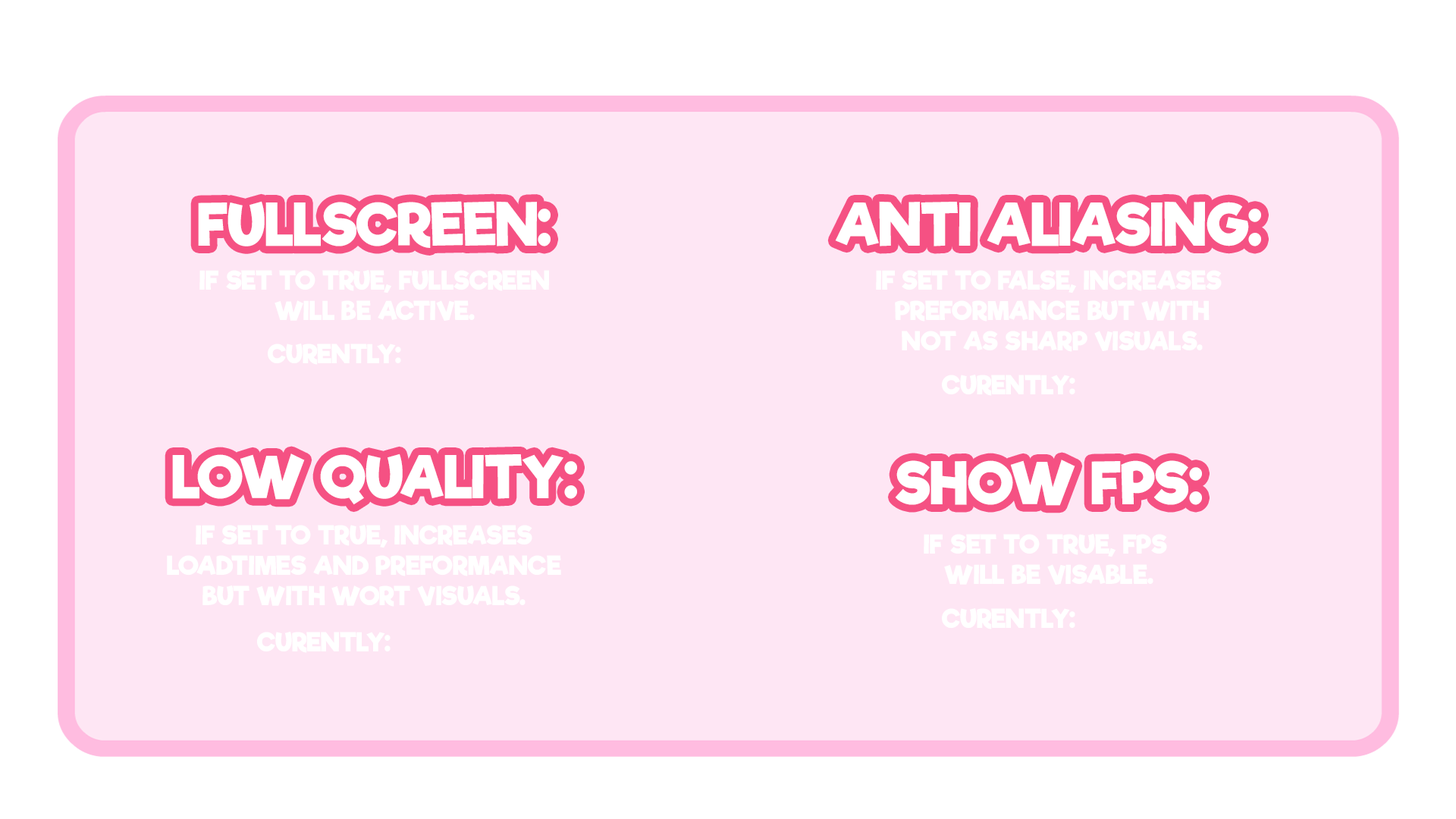
<style>
.page{position:relative;width:1456px;height:819px;background:#fee6f4}
.page>*{position:absolute;margin:0}
.t1{font:56.9px "RifficFree-Bold";color:#ffffff;text-transform:uppercase}
.t2{font:25.3px "RifficFree-Bold";color:#ffffff;text-transform:uppercase}
</style>
<div class="page">
<p class="t1" style="left:198px;top:201px;width:353px;height:47px">Fullscreen:</p>
<p class="t1" style="left:835px;top:201px;width:426px;height:45px">anti aliasing:</p>
<p class="t2" style="left:199px;top:270px;width:350px;height:51px;text-align:center">If set to true, fullscreen<br>will be active.</p>
<p class="t2" style="left:876px;top:270px;width:346px;height:82px;text-align:center">If set to false, Increases <br>preformance but with<br>not as sharp visuals.</p>
<p class="t2" style="left:268px;top:344px;width:133px;height:21px">curently:</p>
<p class="t2" style="left:942px;top:375px;width:133px;height:21px">curently:</p>
<p class="t1" style="left:172px;top:453px;width:405px;height:52px">Low quality:</p>
<p class="t1" style="left:895px;top:460px;width:307px;height:46px">show fps:</p>
<p class="t2" style="left:167px;top:525px;width:394px;height:82px;text-align:center">if set to true, increases<br>loadtimes and preformance<br>but with wort visuals.</p>
<p class="t2" style="left:924px;top:534px;width:243px;height:51px;text-align:center">if set to true, fps <br>will be visable.</p>
<p class="t2" style="left:942px;top:608px;width:133px;height:21px">curently:</p>
<p class="t2" style="left:257px;top:632px;width:134px;height:21px">curently:</p>
</div>
